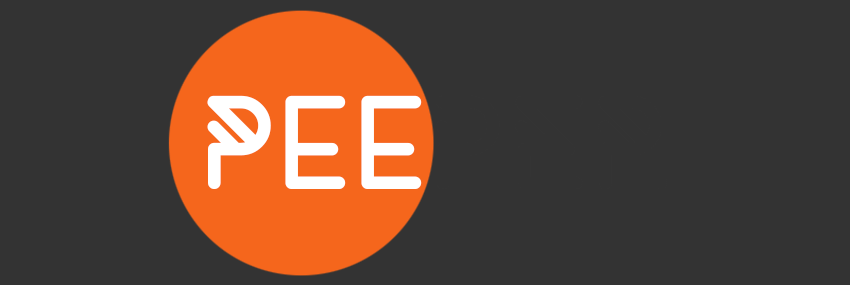
<style>
.page{position:relative;width:850px;height:285px;background:#333333}
.page>*{position:absolute;margin:0}
.t1{font:132.9px "Originalbyfnkfrsh";letter-spacing:0.02em;color:#ffffff}
.t2{font:132.9px "Originalbyfnkfrsh";letter-spacing:0.02em;color:#333333}
</style>
<div class="page">
<p class="t1" style="left:207px;top:95px;width:460px;height:94px">Pee<span class="t2">pER</span></p>
</div>
